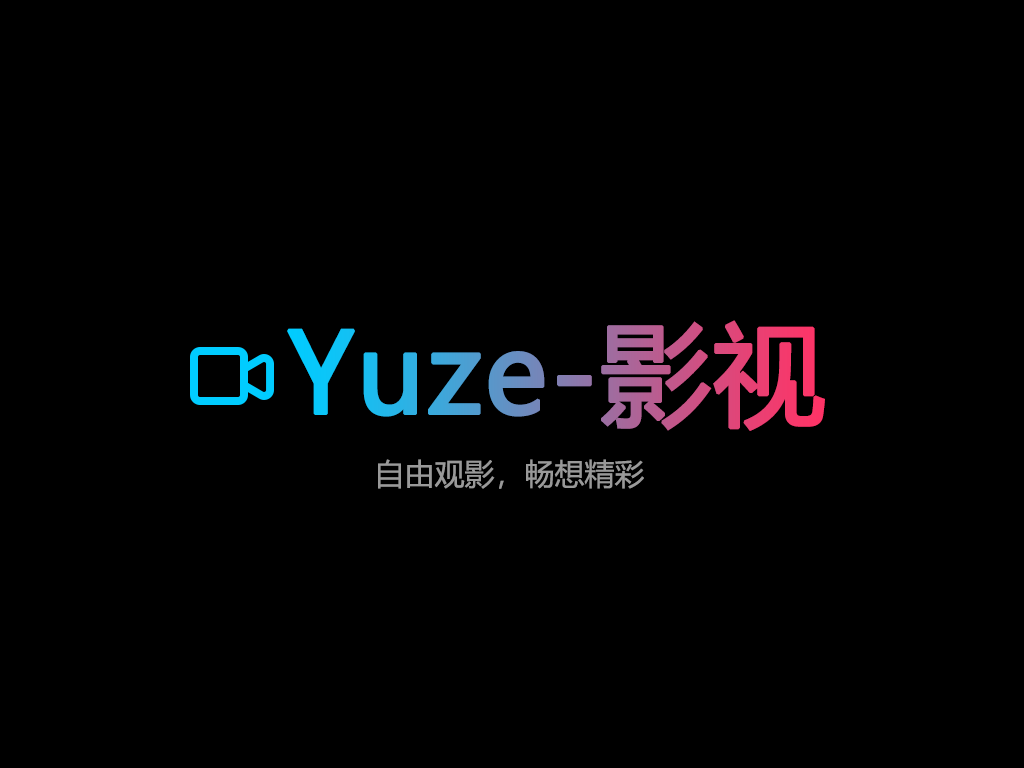
<style>
.page{position:relative;width:1024px;height:768px;background:#000000}
.page>*{position:absolute;margin:0}
.t1{font:110px "MicrosoftYaHei";font-weight:bold}
.t2{font:30px "MicrosoftYaHei";color:#999999}
</style>
<div class="page">
<p class="t1" style="left:287px;top:320px;width:538px;height:111px">Yuze-影视</p>
<p class="t2" style="left:378px;top:459px;width:266px;height:30px">自由观影，畅想精彩</p>
</div>
